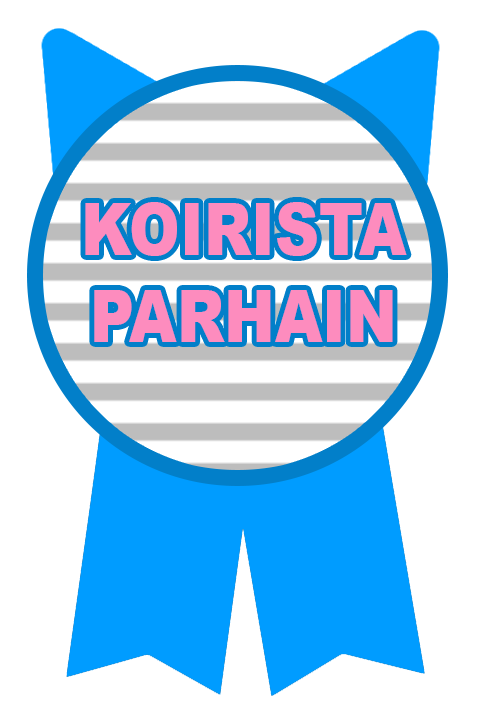
<style>
.page{position:relative;width:484px;height:722px;background:#ffffff}
.page>*{position:absolute;margin:0}
.t1{font:72px "Arial-Black";color:#fd8cbe;scale:0.85 1}
</style>
<div class="page">
<p class="t1" style="left:85px;top:202px;width:322px;height:140px;text-align:center">KOIRISTA<br>PARHAIN</p>
</div>
